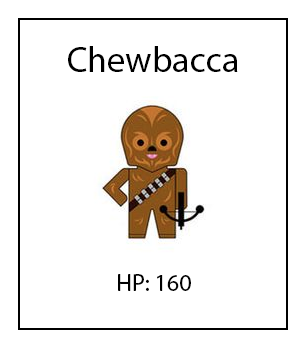
<style>
.page{position:relative;width:306px;height:350px;background:#ffffff}
.page>*{position:absolute;margin:0}
.t1{font:36px "MyriadPro-Regular";color:#000000}
.t2{font:24px "MyriadPro-Regular";color:#000000}
</style>
<div class="page">
<p class="t1" style="left:68px;top:46px;width:170px;height:26px">Chewbacca</p>
<p class="t2" style="left:118px;top:274px;width:73px;height:17px">HP: 160</p>
</div>
